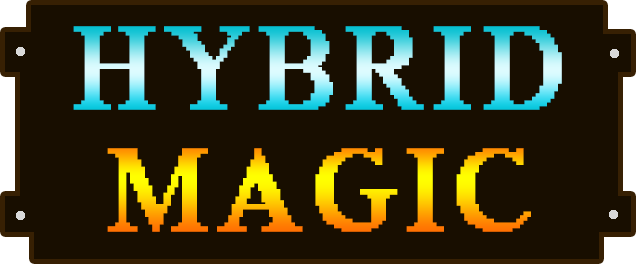
<style>
.page{position:relative;width:636px;height:264px;background:#180e00}
.page>*{position:absolute;margin:0}
.t1{font:118.9px/122px "MS Serif";letter-spacing:0.075em;font-weight:bold}
</style>
<div class="page">
<p class="t1" style="left:73px;top:26px;width:489px;height:206px;text-align:center">HYBRID<br>MAGIC</p>
</div>
